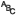
<style>
.page{position:relative;width:16px;height:16px;background:#ffffff}
.page>*{position:absolute;margin:0}
.t1{font:8px "ArialMT";color:#383838;font-weight:bold}
</style>
<div class="page">
<p class="t1" style="left:1px;top:1px;width:6px;height:6px">A</p>
<p class="t1" style="left:6px;top:4px;width:5px;height:7px">B</p>
<p class="t1" style="left:9px;top:8px;width:7px;height:7px">C</p>
</div>
